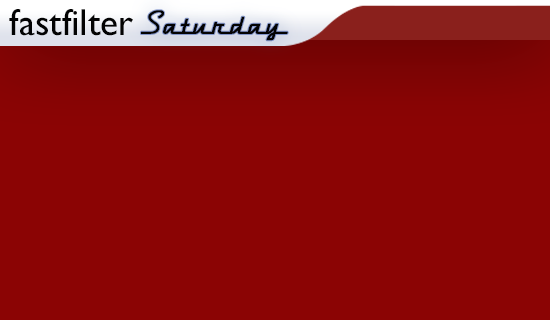
<style>
.page{position:relative;width:550px;height:320px;background:#8b0404}
.page>*{position:absolute;margin:0}
.t1{font:37.7px "GillSansMT";color:#030303}
.t2{font:35.3px "DymaxionScript";letter-spacing:-0.06em;color:#030303;font-weight:bold}
.t3{font:35.3px "DymaxionScript";color:#030303;font-weight:bold}
</style>
<div class="page">
<p class="t1" style="left:9px;top:9px;width:124px;height:27px">fastfilter</p>
<p class="t2" style="left:141px;top:10px;width:147px;height:31px"><span class="t3">S</span>aturday</p>
</div>
